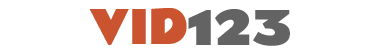
<style>
.page{position:relative;width:385px;height:52px;background:#ffffff}
.page>*{position:absolute;margin:0}
.t1{font:45px "RammettoOne-Regular";color:#ca5430}
.t2{font:45px "RammettoOne-Regular";color:#636363}
</style>
<div class="page">
<p class="t1" style="left:89px;top:8px;width:98px;height:37px">VID</p>
<p class="t2" style="left:188px;top:9px;width:102px;height:37px">123</p>
</div>
